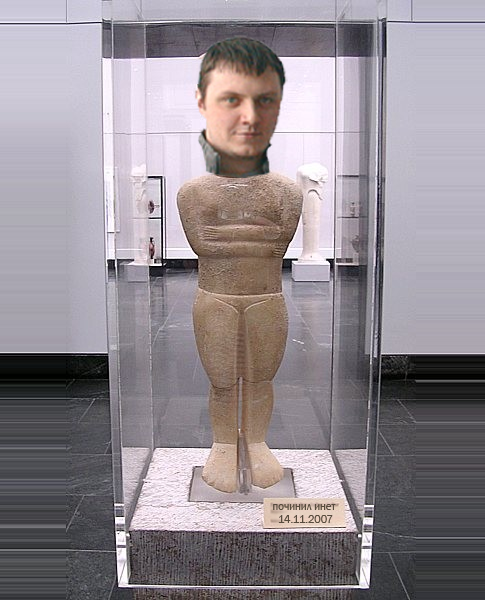
<style>
.page{position:relative;width:485px;height:600px}
.page>*{position:absolute;margin:0}
.t1{font:11px "FranklinGothic-Book";letter-spacing:-0.005em;color:#574b3d}
</style>
<div class="page">
<p class="t1" style="left:273px;top:504px;width:63px;height:19px">починил инет<br>  14.11.2007</p>
</div>
